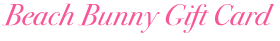
<style>
.page{position:relative;width:280px;height:41px;background:#ffffff}
.page>*{position:absolute;margin:0}
.t1{font:30px "BodoniSvtyTwoOSITCTTBookIt";color:#f75799}
</style>
<div class="page">
<p class="t1" style="left:2px;top:3px;width:272px;height:30px">Beach Bunny Gift Card</p>
</div>
